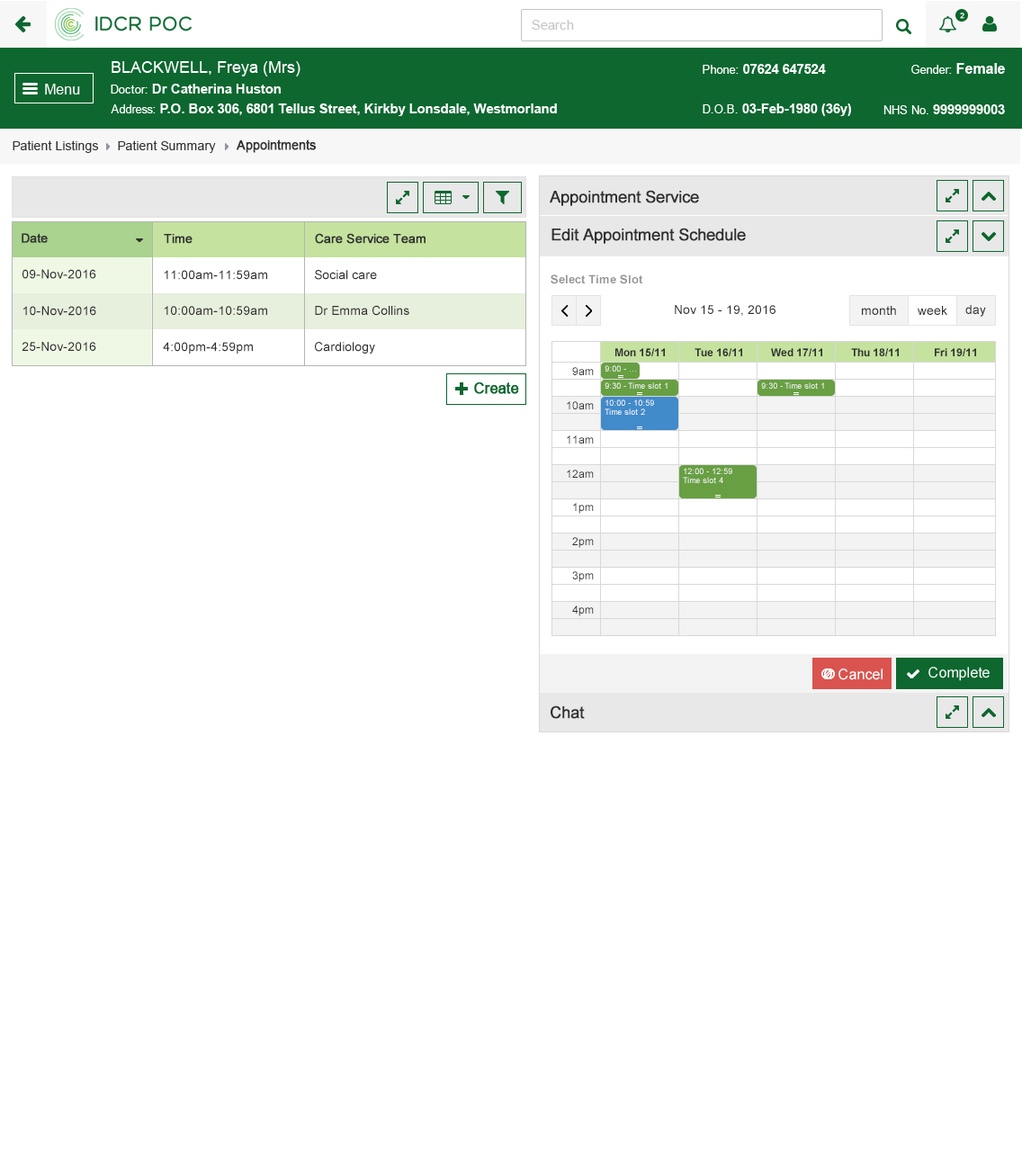
<style>
.page{position:relative;width:1022px;height:1166px;background:#ffffff}
.page>*{position:absolute;margin:0}
.t1{font:7.2px "ArialMT";color:#ffffff;font-weight:bold}
.t2{font:13.5px "ArialMT";color:#c5c5c5}
.t3{font:12.6px "ArialMT";color:#313131}
.t4{font:12.6px "ArialMT";color:#313131;font-weight:bold}
.t5{font:16.2px "ArialMT";color:#303030;font-weight:bold}
.t6{font:12.6px "ArialMT";color:#303030;font-weight:bold}
.t7{font:12.6px "ArialMT";color:#303030}
.t8{font:11.7px "Arial-BoldMT";color:#959595}
.t9{font:10.8px "Arial-BoldMT";color:#303030}
.t10{font:8.1px "ArialMT"}
.t11{font:10.8px "ArialMT";color:#303030}
.t12{font:8.1px "ArialMT";color:#fefefe}
.t13{font:8.1px/9px "ArialMT";color:#fefefe}
</style>
<div class="page">
<p class="t1" style="left:960px;top:13px;width:5px;height:6px">2</p>
<p class="t2" style="left:532px;top:20px;width:42px;height:10px">Search</p>
<p class="t3" style="left:13px;top:140px;width:86px;height:13px">Patient Listings</p>
<p class="t3" style="left:118px;top:140px;width:98px;height:13px">Patient Summary</p>
<p class="t4" style="left:237px;top:139px;width:79px;height:14px">Appointments</p>
<p class="t5" style="left:550px;top:190px;width:149px;height:16px">Appointment Service</p>
<p class="t6" style="left:22px;top:233px;width:26px;height:10px">Date</p>
<p class="t6" style="left:164px;top:234px;width:29px;height:10px">Time</p>
<p class="t6" style="left:315px;top:233px;width:111px;height:11px">Care Service Team</p>
<p class="t5" style="left:552px;top:228px;width:194px;height:16px">Edit Appointment Schedule</p>
<p class="t7" style="left:22px;top:269px;width:74px;height:10px">09-Nov-2016</p>
<p class="t7" style="left:164px;top:270px;width:103px;height:10px">11:00am-11:59am</p>
<p class="t7" style="left:315px;top:270px;width:62px;height:10px">Social care</p>
<p class="t8" style="left:551px;top:274px;width:92px;height:10px">Select Time Slot</p>
<p class="t7" style="left:23px;top:306px;width:73px;height:10px">10-Nov-2016</p>
<p class="t7" style="left:164px;top:306px;width:103px;height:9px">10:00am-10:59am</p>
<p class="t7" style="left:315px;top:305px;width:94px;height:11px">Dr Emma Collins</p>
<p class="t7" style="left:675px;top:305px;width:101px;height:11px">Nov 15 - 19, 2016</p>
<p class="t7" style="left:862px;top:306px;width:34px;height:9px">month</p>
<p class="t7" style="left:918px;top:306px;width:30px;height:9px">week</p>
<p class="t7" style="left:966px;top:305px;width:20px;height:12px">day</p>
<p class="t7" style="left:22px;top:342px;width:74px;height:9px">25-Nov-2016</p>
<p class="t7" style="left:163px;top:342px;width:90px;height:12px">4:00pm-4:59pm</p>
<p class="t7" style="left:315px;top:342px;width:60px;height:12px">Cardiology</p>
<p class="t9" style="left:616px;top:348px;width:49px;height:8px">Mon 15/11</p>
<p class="t9" style="left:695px;top:348px;width:47px;height:8px">Tue 16/11</p>
<p class="t9" style="left:771px;top:348px;width:52px;height:8px">Wed 17/11</p>
<p class="t9" style="left:851px;top:348px;width:48px;height:8px">Thu 18/11</p>
<p class="t9" style="left:935px;top:348px;width:41px;height:8px">Fri 19/11</p>
<p class="t10" style="left:605px;top:365px;width:31px;height:7px">9:00 - ...</p>
<p class="t11" style="left:572px;top:367px;width:22px;height:8px">9am</p>
<p class="t12" style="left:605px;top:382px;width:63px;height:7px">9:30 - Time slot 1</p>
<p class="t12" style="left:761px;top:382px;width:63px;height:7px">9:30 - Time slot 1</p>
<p class="t11" style="left:567px;top:401px;width:27px;height:8px">10am</p>
<p class="t13" style="left:605px;top:400px;width:49px;height:15px">10:00 - 10:59 <br>Time slot 2</p>
<p class="t11" style="left:567px;top:436px;width:27px;height:8px">11am</p>
<p class="t11" style="left:567px;top:470px;width:27px;height:8px">12am</p>
<p class="t13" style="left:683px;top:468px;width:50px;height:15px">12:00 - 12:59 <br>Time slot 4</p>
<p class="t11" style="left:573px;top:503px;width:21px;height:11px">1pm</p>
<p class="t11" style="left:572px;top:537px;width:22px;height:11px">2pm</p>
<p class="t11" style="left:572px;top:571px;width:22px;height:11px">3pm</p>
<p class="t11" style="left:572px;top:606px;width:22px;height:10px">4pm</p>
<p class="t5" style="left:551px;top:706px;width:34px;height:13px">Chat</p>
</div>
